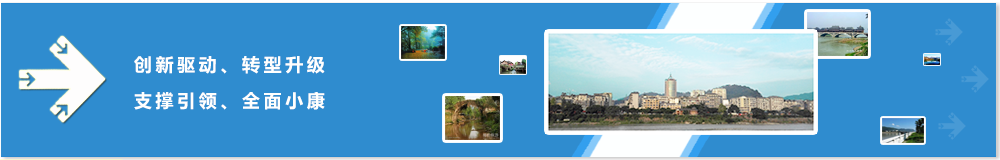
<style>
.page{position:relative;width:1000px;height:160px;background:#2f8ccf}
.page>*{position:absolute;margin:0}
.t1{font:18px/36px "MicrosoftYaHei-Bold";letter-spacing:0.2em;color:#fffffe}
</style>
<div class="page">
<p class="t1" style="left:134px;top:56px;width:191px;height:54px">创新驱动、转型升级<br>支撑引领、全面小康</p>
</div>
